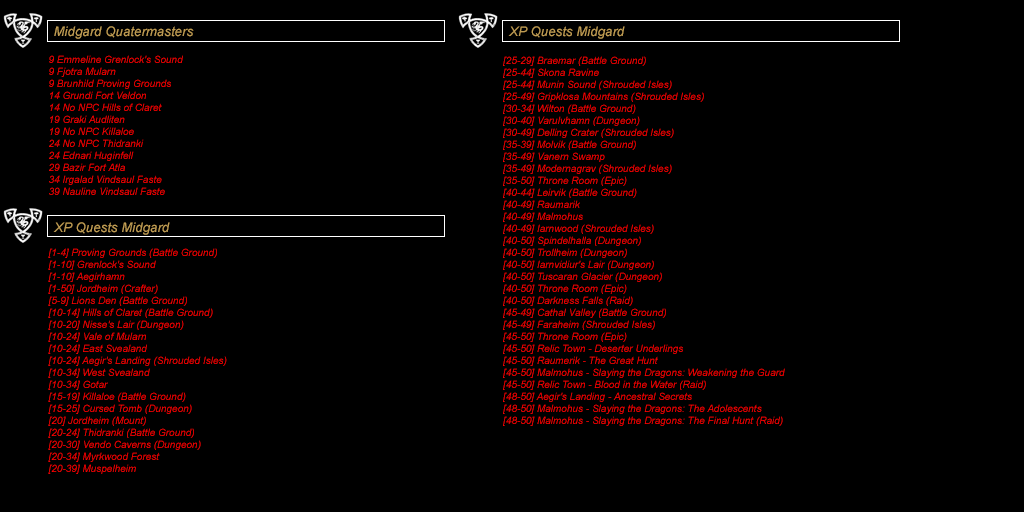
<style>
.page{position:relative;width:1024px;height:512px;background:#000000}
.page>*{position:absolute;margin:0}
.t1{font:13.3px "Arial-ItalicMT";color:#be9b53}
.t2{font:10px "Arial-ItalicMT";color:#ff0000}
</style>
<div class="page">
<p class="t1" style="left:54px;top:26px;width:140px;height:13px">Midgard Quatermasters</p>
<p class="t1" style="left:508px;top:26px;width:117px;height:13px">XP Quests Midgard</p>
<p class="t2" style="left:49px;top:55px;width:134px;height:140px">9 Emmeline Grenlock's Sound<br>9 Fjotra Mularn<br>9 Brunhild Proving Grounds<br>14 Grundi Fort Veldon<br>14 No NPC Hills of Claret<br>19 Graki Audliten<br>19 No NPC Killaloe<br>24 No NPC Thidranki<br>24 Ednari Huginfell<br>29 Bazir Fort Atla<br>34 Irgalad Vindsaul Faste<br>39 Nauline Vindsaul Faste</p>
<p class="t2" style="left:503px;top:56px;width:282px;height:370px">[25-29] Braemar (Battle Ground)<br>[25-44] Skona Ravine<br>[25-44] Munin Sound (Shrouded Isles)<br>[25-49] Gripklosa Mountains (Shrouded Isles)<br>[30-34] Wilton (Battle Ground)<br>[30-40] Varulvhamn (Dungeon)<br>[30-49] Delling Crater (Shrouded Isles)<br>[35-39] Molvik (Battle Ground)<br>[35-49] Vanern Swamp<br>[35-49] Modernagrav (Shrouded Isles)<br>[35-50] Throne Room (Epic)<br>[40-44] Leirvik (Battle Ground)<br>[40-49] Raumarik<br>[40-49] Malmohus<br>[40-49] Iarnwood (Shrouded Isles)<br>[40-50] Spindelhalla (Dungeon)<br>[40-50] Trollheim (Dungeon)<br>[40-50] Iarnvidiur's Lair (Dungeon)<br>[40-50] Tuscaran Glacier (Dungeon)<br>[40-50] Throne Room (Epic)<br>[40-50] Darkness Falls (Raid)<br>[45-49] Cathal Valley (Battle Ground)<br>[45-49] Faraheim (Shrouded Isles)<br>[45-50] Throne Room (Epic)<br>[45-50] Relic Town - Deserter Underlings<br>[45-50] Raumerik - The Great Hunt<br>[45-50] Malmohus - Slaying the Dragons: Weakening the Guard<br>[45-50] Relic Town - Blood in the Water (Raid)<br>[48-50] Aegir's Landing - Ancestral Secrets<br>[48-50] Malmohus - Slaying the Dragons: The Adolescents<br>[48-50] Malmohus - Slaying the Dragons: The Final Hunt (Raid)</p>
<p class="t1" style="left:53px;top:222px;width:117px;height:13px">XP Quests Midgard</p>
<p class="t2" style="left:48px;top:248px;width:179px;height:226px">[1-4] Proving Grounds (Battle Ground)<br>[1-10] Grenlock's Sound<br>[1-10] Aegirhamn<br>[1-50] Jordheim (Crafter)<br>[5-9] Lions Den (Battle Ground)<br>[10-14] Hills of Claret (Battle Ground)<br>[10-20] Nisse's Lair (Dungeon)<br>[10-24] Vale of Mularn<br>[10-24] East Svealand<br>[10-24] Aegir's Landing (Shrouded Isles)<br>[10-34] West Svealand<br>[10-34] Gotar<br>[15-19] Killaloe (Battle Ground)<br>[15-25] Cursed Tomb (Dungeon)<br>[20] Jordheim (Mount)<br>[20-24] Thidranki (Battle Ground)<br>[20-30] Vendo Caverns (Dungeon)<br>[20-34] Myrkwood Forest<br>[20-39] Muspelheim</p>
</div>
